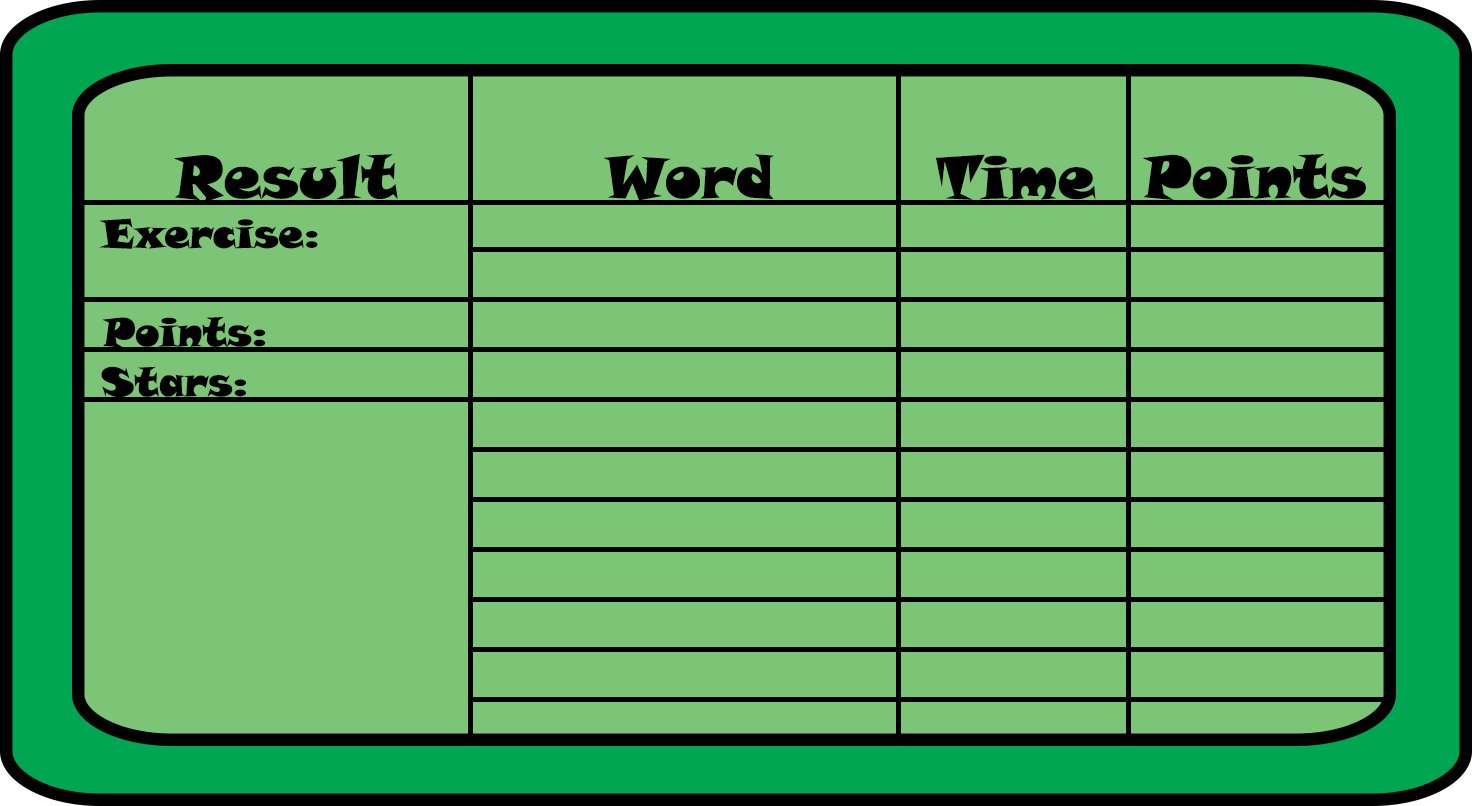
<style>
.page{position:relative;width:1472px;height:806px;background:#7cc576}
.page>*{position:absolute;margin:0}
.t1{font:60px "SnapITC-Regular";color:#000000}
.t2{font:40px "SnapITC-Regular";color:#000000}
</style>
<div class="page">
<p class="t1" style="left:174px;top:153px;width:224px;height:50px">Result</p>
<p class="t1" style="left:603px;top:154px;width:171px;height:47px">Word</p>
<p class="t1" style="left:936px;top:154px;width:160px;height:46px">Time</p>
<p class="t1" style="left:1142px;top:154px;width:224px;height:46px">Points</p>
<p class="t2" style="left:99px;top:218px;width:219px;height:31px">Exercise:</p>
<p class="t2" style="left:102px;top:317px;width:164px;height:31px">Points:</p>
<p class="t2" style="left:101px;top:366px;width:145px;height:31px">Stars:</p>
</div>
